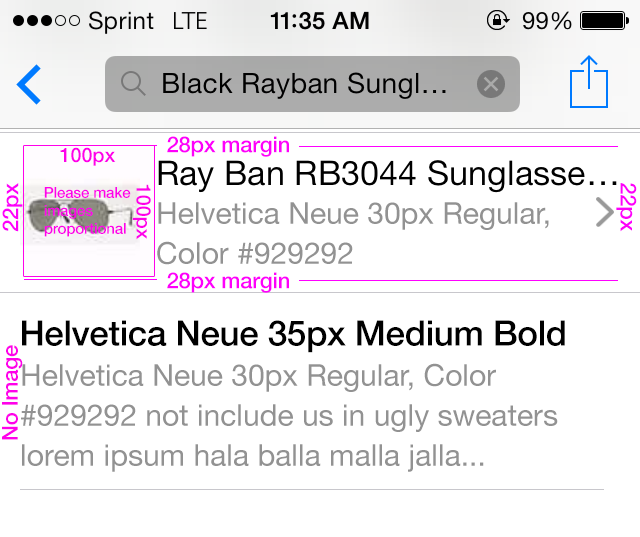
<style>
.page{position:relative;width:640px;height:537px;background:#ffffff}
.page>*{position:absolute;margin:0}
.t1{font:22px "HelveticaNeue-Medium";letter-spacing:-0.01em;color:#fe00fb}
.t2{font:20px "HelveticaNeue-Medium";letter-spacing:-0.01em;color:#ff01ea}
.t3{font:15px "HelveticaNeue-Medium";letter-spacing:-0.01em;color:#ff01ea}
.t4{font:30px/40px "HelveticaNeue";color:#929292}
.t5{font:35px "HelveticaNeue-Medium";letter-spacing:-0.01em;color:#000000}
.t6{font:22px "HelveticaNeue-Medium";letter-spacing:-0.01em;color:#ff01ea}
</style>
<div class="page">
<p class="t1" style="left:167px;top:136px;width:122px;height:21px">28px margin</p>
<p class="t2" style="left:60px;top:147px;width:56px;height:19px">100px</p>
<p class="t1" style="left:2px;top:183px;width:21px;height:49px;rotate:-90deg">22px</p>
<p class="t2" style="left:132px;top:184px;width:19px;height:56px;rotate:90deg">100px</p>
<p class="t1" style="left:616px;top:183px;width:21px;height:49px;rotate:90deg">22px</p>
<p class="t3" style="left:44px;top:187px;width:87px;height:50px">Please make <br>images <br>proportional</p>
<p class="t4" style="left:157px;top:202px;width:392px;height:63px">Helvetica Neue 30px Regular, Color #929292</p>
<p class="t1" style="left:167px;top:272px;width:122px;height:21px">28px margin</p>
<p class="t5" style="left:22px;top:320px;width:543px;height:33px">Helvetica Neue 35px Medium Bold</p>
<p class="t6" style="left:2px;top:345px;width:21px;height:95px;rotate:-90deg">No Image</p>
<p class="t4" style="left:21px;top:363px;width:537px;height:109px">Helvetica Neue 30px Regular, Color #929292 not include us in ugly sweaters lorem ipsum hala balla malla jalla...</p>
</div>
